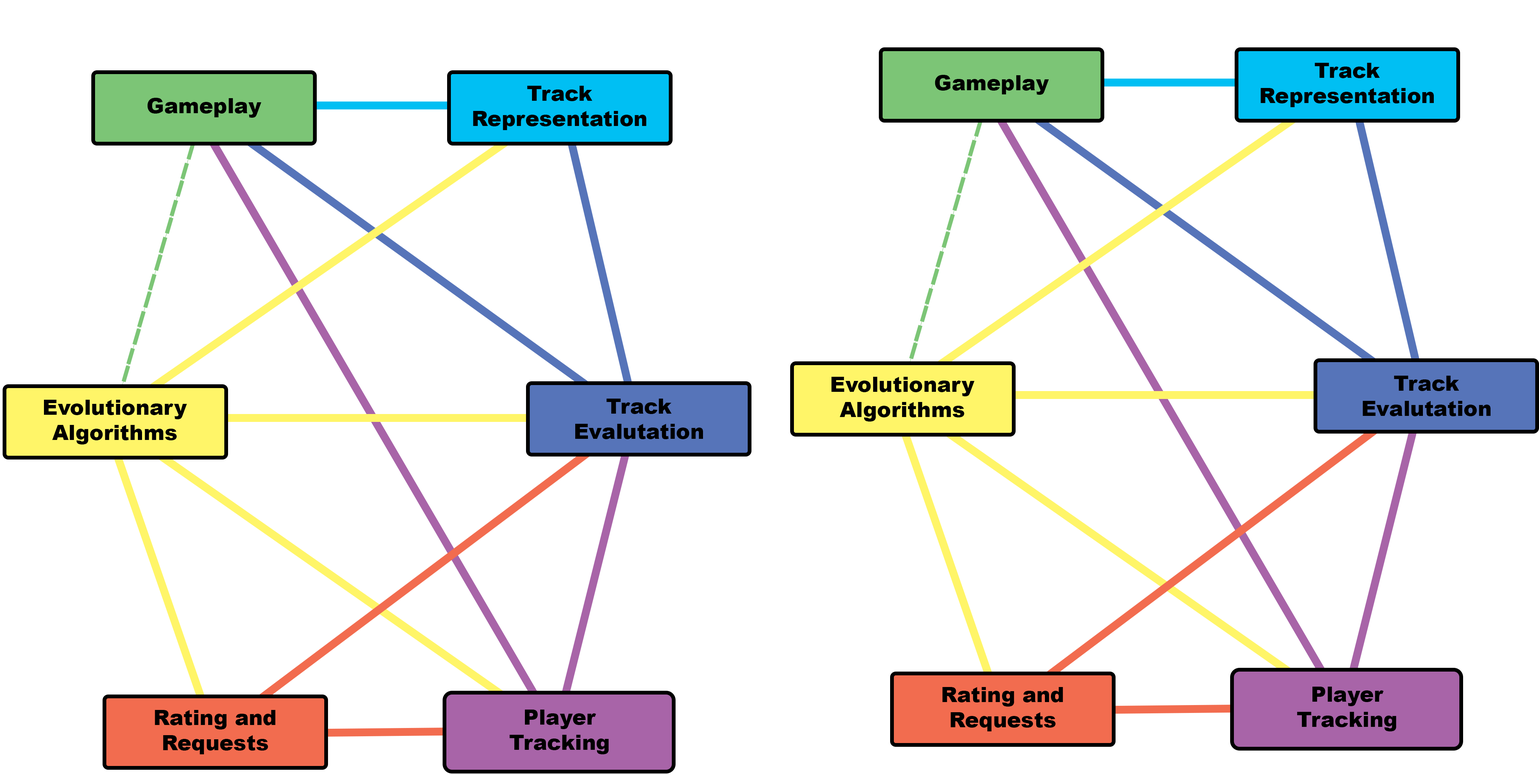
<style>
.page{position:relative;width:1539px;height:775px;background:#ffffff}
.page>*{position:absolute;margin:0}
.t1{font:21px "Arial-Black";color:#000000}
</style>
<div class="page">
<p class="t1" style="left:473px;top:86px;width:173px;height:44px;text-align:center">Track<br>Representation</p>
<p class="t1" style="left:147px;top:98px;width:115px;height:20px">Gameplay</p>
<p class="t1" style="left:44px;top:400px;width:143px;height:44px;text-align:center">Evolutionary<br>Algorithms</p>
<p class="t1" style="left:575px;top:398px;width:128px;height:41px;text-align:center">Track<br>Evalutation</p>
<p class="t1" style="left:155px;top:710px;width:120px;height:44px;text-align:center">Rating and<br>Requests</p>
<p class="t1" style="left:510px;top:709px;width:99px;height:45px;text-align:center">Player<br>Tracking</p>
</div>
